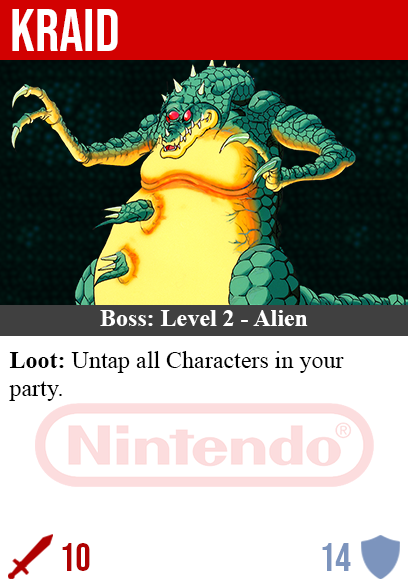
<style>
.page{position:relative;width:408px;height:585px;background:#ffffff}
.page>*{position:absolute;margin:0}
.t1{font:60px "BebasNeue-Regular";color:#ffffff}
.t2{font:24px "TimesNewRomanPS-BoldMT";color:#ffffff}
.t3{font:24px "TimesNewRomanPSMT";color:#000000}
.t4{font:24px "TimesNewRomanPS-BoldMT";color:#000000}
.t5{font:40px "BebasNeue-Regular";color:#af0202}
.t6{font:40px "BebasNeue-Regular";color:#7c94bd}
</style>
<div class="page">
<p class="t1" style="left:12px;top:9px;width:106px;height:42px">kraid</p>
<p class="t2" style="left:100px;top:310px;width:208px;height:16px">Boss: Level 2 - Alien</p>
<p class="t3" style="left:9px;top:351px;width:335px;height:50px"><span class="t4">Loot:</span> Untap all Characters in your<br>party.</p>
<p class="t5" style="left:62px;top:543px;width:28px;height:28px">10</p>
<p class="t6" style="left:322px;top:543px;width:29px;height:28px">14</p>
</div>
